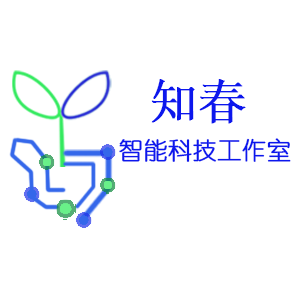
<style>
.page{position:relative;width:300px;height:300px;background:#ffffff}
.page>*{position:absolute;margin:0}
.t1{font:48px "SimSun";color:#0c17ed;font-weight:bold}
.t2{font:24px "YouYuan";color:#0c17ed;font-weight:bold}
</style>
<div class="page">
<p class="t1" style="left:151px;top:79px;width:95px;height:45px">知春</p>
<p class="t2" style="left:119px;top:138px;width:172px;height:24px">智能科技工作室</p>
</div>
